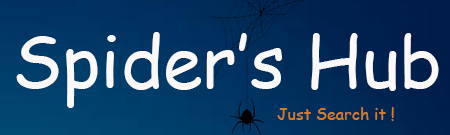
<style>
.page{position:relative;width:450px;height:135px}
.page>*{position:absolute;margin:0}
.t1{font:72px "ComicSansMS";color:#faf8f8}
.t2{font:16px "ComicSansMS";color:#d57c2c}
</style>
<div class="page">
<p class="t1" style="left:16px;top:32px;width:423px;height:76px">Spider’s Hub</p>
<p class="t2" style="left:277px;top:107px;width:117px;height:14px">Just Search it !</p>
</div>
